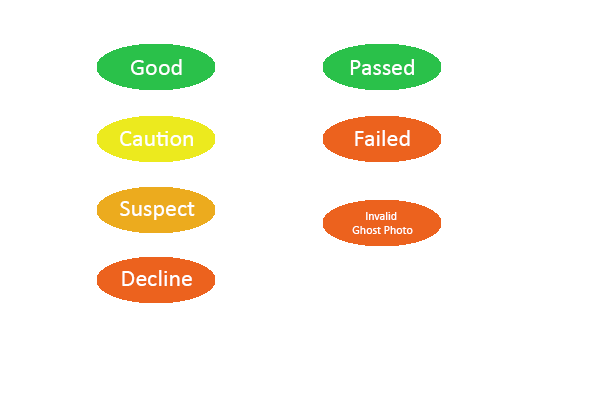
<style>
.page{position:relative;width:600px;height:400px;background:#ffffff}
.page>*{position:absolute;margin:0}
.t1{font:24px "Calibri";color:#ffffff}
.t2{font:12px "Calibri";color:#ffffff}
</style>
<div class="page">
<p class="t1" style="left:131px;top:59px;width:51px;height:16px">Good</p>
<p class="t1" style="left:350px;top:59px;width:64px;height:16px">Passed</p>
<p class="t1" style="left:120px;top:131px;width:73px;height:15px">Caution</p>
<p class="t1" style="left:355px;top:130px;width:55px;height:16px">Failed</p>
<p class="t1" style="left:120px;top:201px;width:75px;height:19px">Suspect</p>
<p class="t2" style="left:352px;top:212px;width:61px;height:22px;text-align:center">Invalid <br>Ghost Photo</p>
<p class="t1" style="left:122px;top:270px;width:70px;height:16px">Decline</p>
</div>
